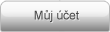
<style>
.page{position:relative;width:110px;height:32px}
.page>*{position:absolute;margin:0}
.t1{font:12px "ArialMT";color:#464646}
</style>
<div class="page">
<p class="t1" style="left:34px;top:10px;width:45px;height:12px">Můj účet</p>
</div>
